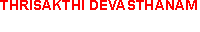
<style>
.page{position:relative;width:200px;height:32px;background:#ffffff}
.page>*{position:absolute;margin:0}
.t1{font:14px "Arial-BoldMT";color:#ff0000}
</style>
<div class="page">
<p class="t1" style="left:0px;top:0px;width:197px;height:10px">THRISAKTHI DEVASTHANAM</p>
</div>
